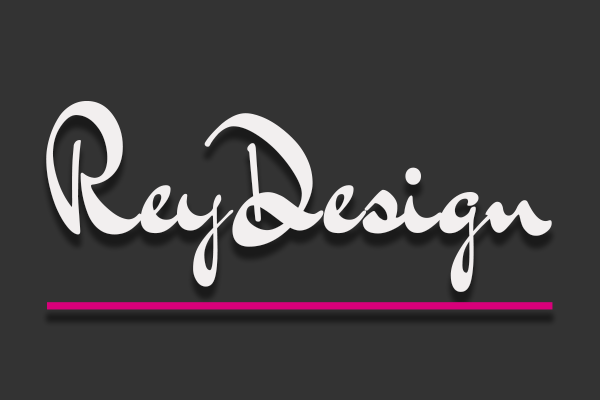
<style>
.page{position:relative;width:600px;height:400px;background:#333333}
.page>*{position:absolute;margin:0}
.t1{font:144px "DrSugiyama-Regular";color:#f2efef}
</style>
<div class="page">
<p class="t1" style="left:46px;top:101px;width:506px;height:191px">ReyDesign</p>
</div>
